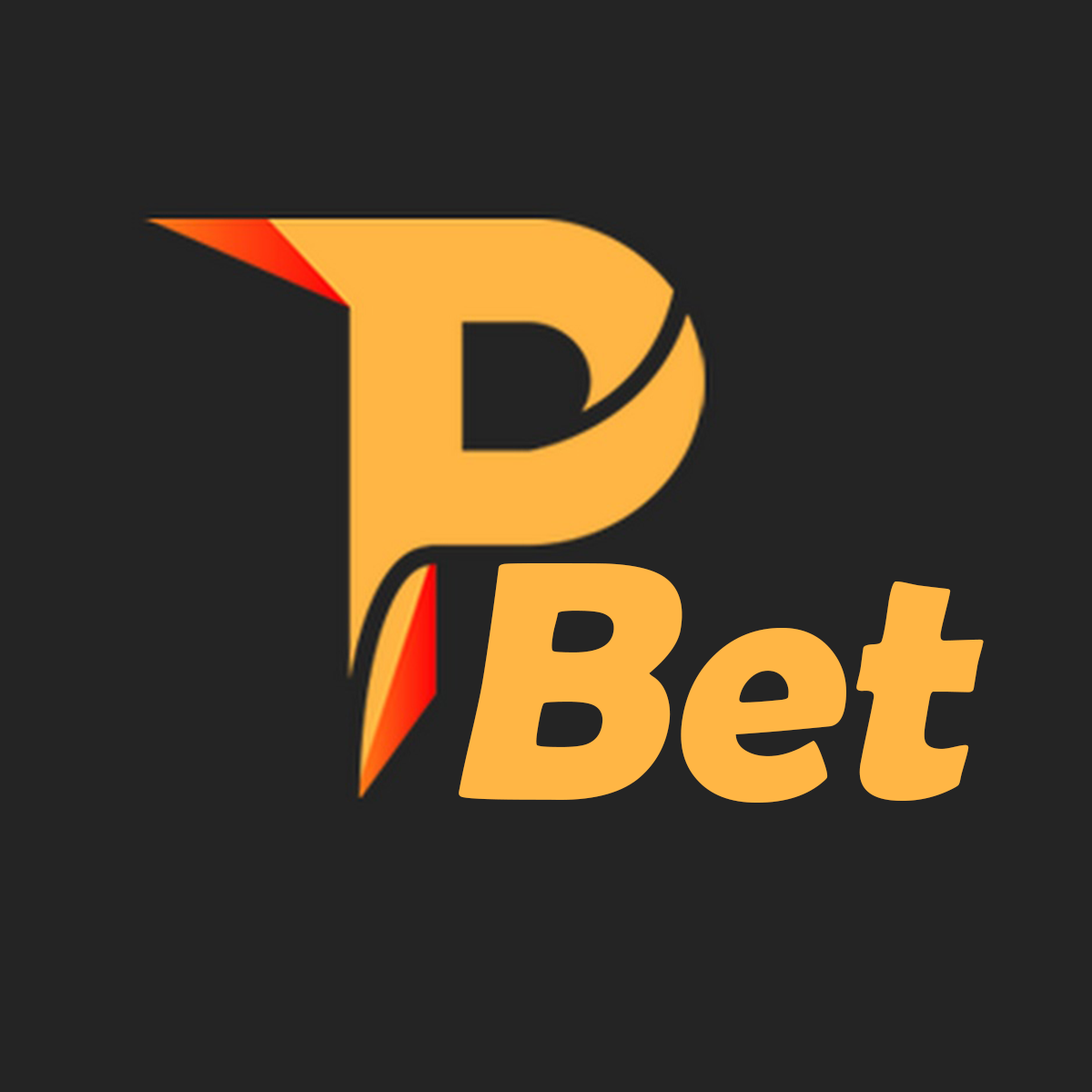
<style>
.page{position:relative;width:1092px;height:1092px;background:#242424}
.page>*{position:absolute;margin:0}
.t1{font:342.3px "BerlinSansFBDemi-Bold";color:#ffb645;font-style:italic}
</style>
<div class="page">
<p class="t1" style="left:459px;top:563px;width:525px;height:240px">Bet</p>
</div>
